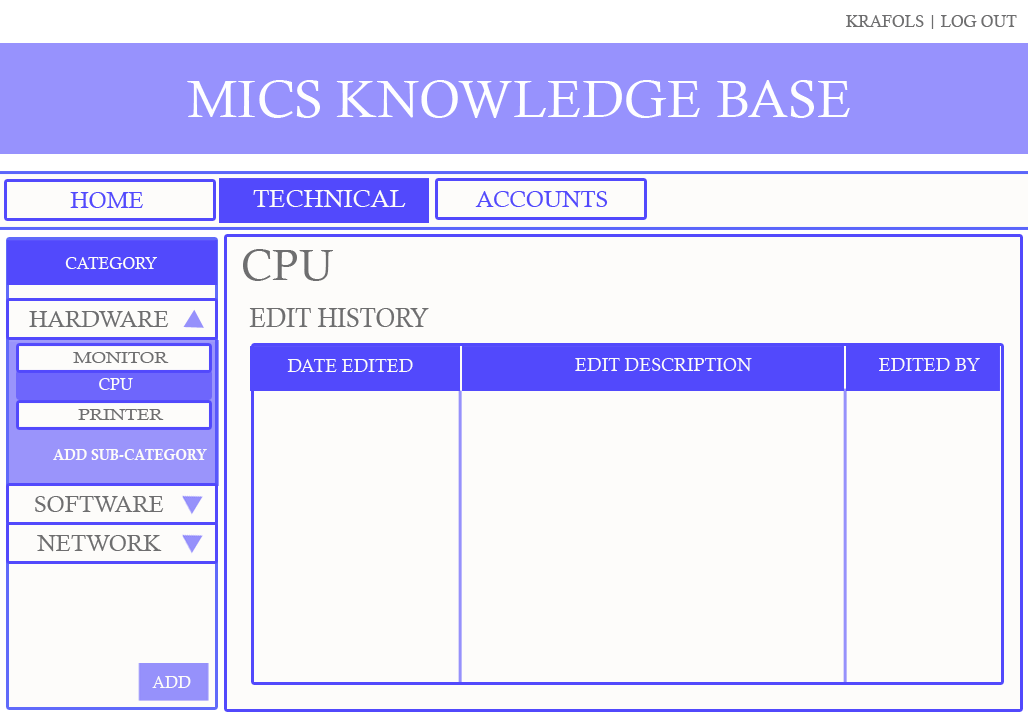
<style>
.page{position:relative;width:1028px;height:720px;background:#fdfcfa}
.page>*{position:absolute;margin:0}
.t1{font:16px "CalistoMT";color:#6e6e6f}
.t2{font:52.3px "CalistoMT";color:#fefeff}
.t3{font:22.8px "CalistoMT";color:#5249fc}
.t4{font:24.8px "CalistoMT";color:#fdfcf9}
.t5{font:16px "CalistoMT";color:#fdfcf9}
.t6{font:43.4px "CalistoMT";color:#6e6e6f}
.t7{font:22.8px "CalistoMT";color:#6e6e6f}
.t8{font:27.8px "CalistoMT";color:#6e6e6f;scale:0.88 1}
.t9{font:15.2px "CalistoMT";color:#6e6e6f;scale:1.22 1}
.t10{font:18px "CalistoMT";color:#fdfcf9}
.t11{font:14.8px "CalisMTBol";color:#fdfcf9;scale:0.95 1}
</style>
<div class="page">
<p class="t1" style="left:846px;top:15px;width:171px;height:14px">KRAFOLS | LOG OUT</p>
<p class="t2" style="left:187px;top:80px;width:663px;height:38px">MICS KNOWLEDGE BASE</p>
<p class="t3" style="left:70px;top:192px;width:73px;height:16px">HOME</p>
<p class="t4" style="left:253px;top:190px;width:153px;height:18px">TECHNICAL</p>
<p class="t3" style="left:475px;top:191px;width:133px;height:17px">ACCOUNTS</p>
<p class="t5" style="left:65px;top:257px;width:92px;height:12px">CATEGORY</p>
<p class="t6" style="left:243px;top:249px;width:90px;height:32px">CPU</p>
<p class="t7" style="left:29px;top:311px;width:140px;height:16px">HARDWARE</p>
<p class="t8" style="left:249px;top:308px;width:180px;height:19px">EDIT HISTORY</p>
<p class="t9" style="left:73px;top:352px;width:96px;height:11px">MONITOR</p>
<p class="t10" style="left:287px;top:359px;width:126px;height:13px">DATE EDITED</p>
<p class="t10" style="left:575px;top:358px;width:177px;height:14px">EDIT DESCRIPTION</p>
<p class="t10" style="left:879px;top:358px;width:101px;height:13px">EDITED BY</p>
<p class="t5" style="left:99px;top:378px;width:34px;height:12px">CPU</p>
<p class="t9" style="left:78px;top:409px;width:86px;height:11px">PRINTER</p>
<p class="t11" style="left:53px;top:449px;width:154px;height:11px">ADD SUB-CATEGORY</p>
<p class="t7" style="left:35px;top:496px;width:129px;height:16px">SOFTWARE</p>
<p class="t7" style="left:37px;top:535px;width:125px;height:17px">NETWORK</p>
<p class="t5" style="left:152px;top:676px;width:39px;height:12px">ADD</p>
</div>
